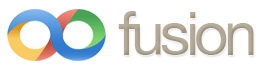
<style>
.page{position:relative;width:274px;height:70px;background:#ffffff}
.page>*{position:absolute;margin:0}
.t1{font:60px "HelveticaNeue";letter-spacing:-0.075em;color:#b2a895}
</style>
<div class="page">
<p class="t1" style="left:118px;top:11px;width:136px;height:44px">fusion</p>
</div>
